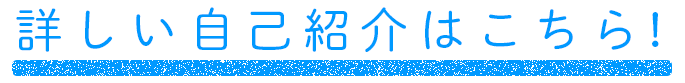
<style>
.page{position:relative;width:685px;height:83px;background:#ffffff}
.page>*{position:absolute;margin:0}
.t1{font:48px "DNPShueiMGoStd-L";letter-spacing:0.2em;color:#0099ff}
</style>
<div class="page">
<p class="t1" style="left:16px;top:7px;width:643px;height:45px">詳しい自己紹介はこちら!</p>
</div>
